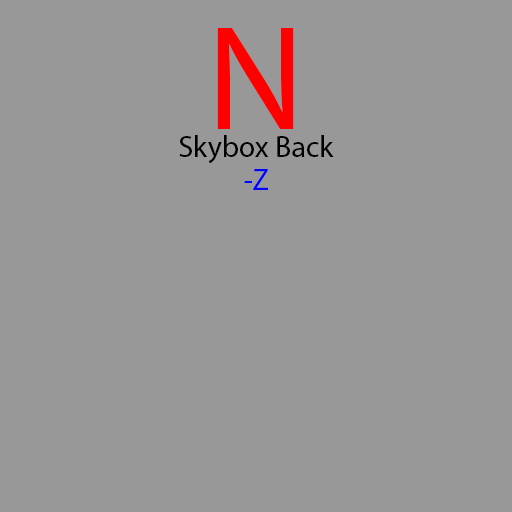
<style>
.page{position:relative;width:512px;height:512px;background:#989898}
.page>*{position:absolute;margin:0}
.t1{font:150px "MyriadPro-Regular";color:#ff0000}
.t2{font:30px "MyriadPro-Regular";color:#000000}
.t3{font:30px "MyriadPro-Regular";color:#0000ff}
</style>
<div class="page">
<p class="t1" style="left:217px;top:28px;width:77px;height:101px">N</p>
<p class="t2" style="left:179px;top:135px;width:155px;height:29px">Skybox Back</p>
<p class="t3" style="left:244px;top:169px;width:24px;height:21px">-Z</p>
</div>
